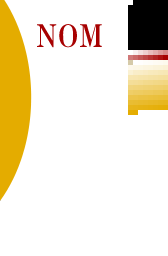
<style>
.page{position:relative;width:168px;height:256px;background:#ffffff}
.page>*{position:absolute;margin:0}
.t1{font:30.6px "HGPMinchoE";letter-spacing:0.025em;color:#a70101}
</style>
<div class="page">
<p class="t1" style="left:37px;top:24px;width:65px;height:24px">NOM</p>
</div>
